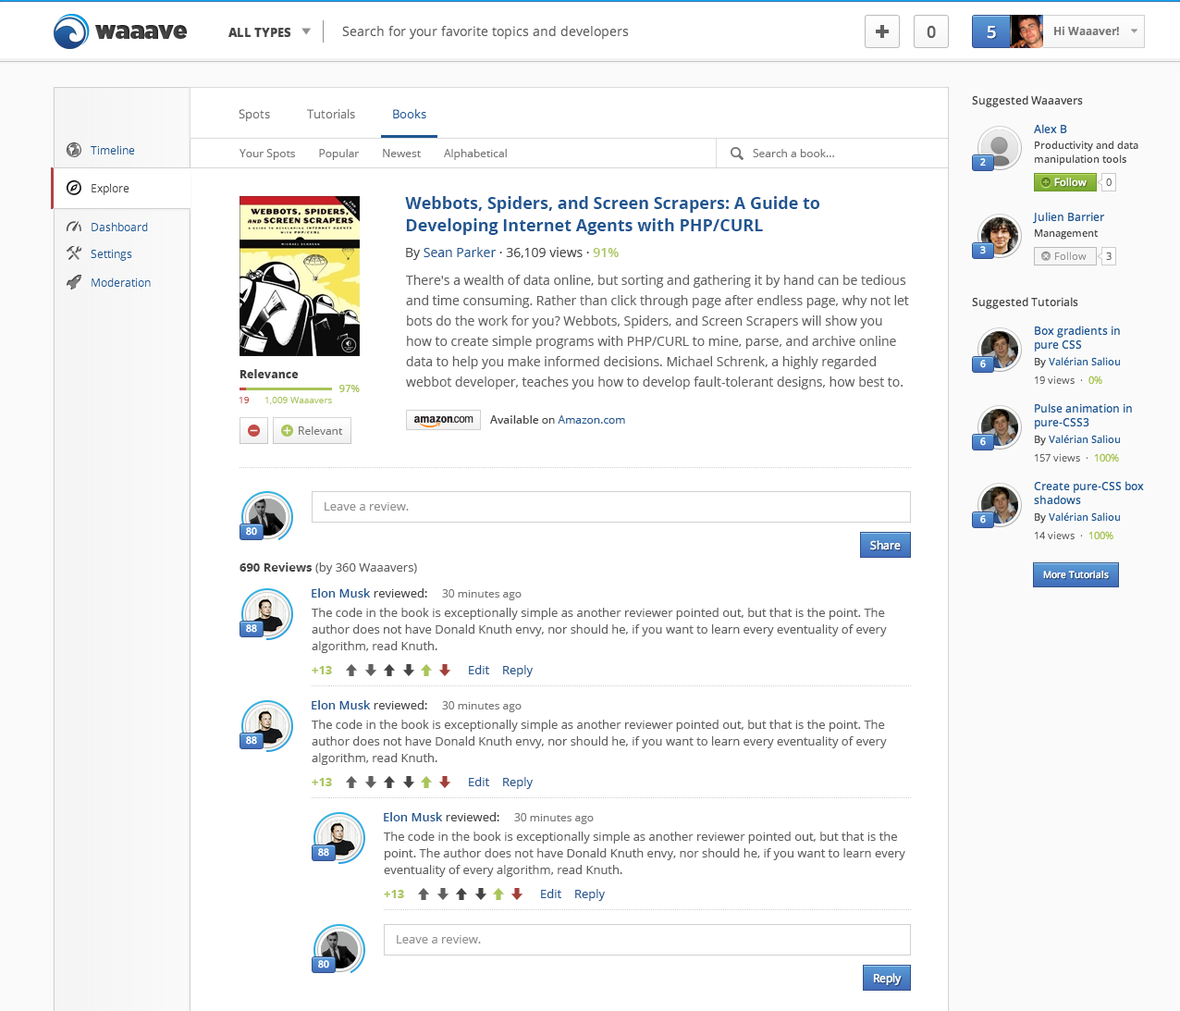
<style>
.page{position:relative;width:1180px;height:1011px;background:#ffffff}
.page>*{position:absolute;margin:0}
.t1{font:11.1px "OpenSans";color:#757575}
.t2{font:16.6px/22.2px "OpenSans-Bold";color:#1f5691}
.t3{font:12.9px "OpenSans";color:#454545}
.t4{font:12.9px "OpenSans";color:#1f5691}
.t5{font:12.9px "OpenSans-Semibold";color:#a9c55a}
.t6{font:12.9px/20.3px "OpenSans";color:#606060}
.t7{font:11.1px "OpenSans-Extrabold";color:#454545}
.t8{font:10.2px "OpenSans-Semibold";color:#aac55a}
.t9{font:9.2px "OpenSans";color:#c34c47}
.t10{font:9.2px "OpenSans";color:#aac55a}
.t11{font:11.1px "OpenSans";color:#1f5691}
.t12{font:11.1px "OpenSans-Semibold";color:#454545}
.t13{font:11.1px "OpenSans";color:#454545}
.t14{font:12px "OpenSans";color:#909090}
.t15{font:12px "OpenSans";color:#606060}
.t16{font:12px "OpenSans-Bold";color:#454545}
.t17{font:12px "OpenSans-Semibold";color:#1f5691}
.t18{font:12px "OpenSans";color:#454545}
.t19{font:12px/16.6px "OpenSans";color:#606060}
.t20{font:12px "OpenSans-Bold";color:#a9c55a}
.t21{font:12px "OpenSans";color:#1f5691}
</style>
<div class="page">
<p class="t1" style="left:239px;top:149px;width:268px;height:11px">Your Spots        Popular        Newest        Alphabetical</p>
<p class="t1" style="left:753px;top:149px;width:81px;height:8px">Search a book...</p>
<p class="t2" style="left:405px;top:196px;width:415px;height:39px">Webbots, Spiders, and Screen Scrapers: A Guide to<br>Developing Internet Agents with PHP/CURL</p>
<p class="t3" style="left:406px;top:247px;width:213px;height:13px">By <span class="t4">Sean Parker </span>· 36,109 views · <span class="t5">91%</span></p>
<p class="t6" style="left:406px;top:275px;width:503px;height:114px">There's a wealth of data online, but sorting and gathering it by hand can be tedious<br>and time consuming. Rather than click through page after endless page, why not let<br>bots do the work for you? Webbots, Spiders, and Screen Scrapers will show you<br>how to create simple programs with PHP/CURL to mine, parse, and archive online<br>data to help you make informed decisions. Michael Schrenk, a highly regarded<br>webbot developer, teaches you how to develop fault-tolerant designs, how best to.</p>
<p class="t7" style="left:239px;top:369px;width:60px;height:9px">Relevance</p>
<p class="t8" style="left:339px;top:385px;width:21px;height:7px">97%</p>
<p class="t9" style="left:239px;top:397px;width:10px;height:6px">19</p>
<p class="t10" style="left:264px;top:397px;width:68px;height:7px">1,009 Waaavers</p>
<p class="t11" style="left:490px;top:415px;width:135px;height:8px"><span class="t12">Available</span><span class="t13"> on </span>Amazon.com</p>
<p class="t1" style="left:299px;top:426px;width:44px;height:9px">Relevant</p>
<p class="t14" style="left:325px;top:502px;width:84px;height:8px">Leave a review.</p>
<p class="t15" style="left:239px;top:562px;width:178px;height:12px"><span class="t16">690 Reviews </span>(by 360 Waaavers)</p>
<p class="t1" style="left:312px;top:588px;width:210px;height:12px"><span class="t17">Elon Musk </span><span class="t18">reviewed:     </span>30 minutes ago</p>
<p class="t19" style="left:312px;top:608px;width:575px;height:45px">The code in the book is exceptionally simple as another reviewer pointed out, but that is the point. The<br>author does not have Donald Knuth envy, nor should he, if you want to learn every eventuality of every<br>algorithm, read Knuth.</p>
<p class="t20" style="left:312px;top:666px;width:20px;height:8px">+13</p>
<p class="t21" style="left:469px;top:665px;width:20px;height:9px">Edit</p>
<p class="t21" style="left:503px;top:665px;width:30px;height:12px">Reply</p>
<p class="t1" style="left:312px;top:700px;width:210px;height:12px"><span class="t17">Elon Musk </span><span class="t18">reviewed:     </span>30 minutes ago</p>
<p class="t19" style="left:312px;top:719px;width:575px;height:46px">The code in the book is exceptionally simple as another reviewer pointed out, but that is the point. The<br>author does not have Donald Knuth envy, nor should he, if you want to learn every eventuality of every<br>algorithm, read Knuth.</p>
<p class="t20" style="left:312px;top:778px;width:20px;height:8px">+13</p>
<p class="t21" style="left:469px;top:777px;width:20px;height:9px">Edit</p>
<p class="t21" style="left:503px;top:777px;width:30px;height:12px">Reply</p>
<p class="t1" style="left:384px;top:812px;width:210px;height:12px"><span class="t17">Elon Musk </span><span class="t18">reviewed:     </span>30 minutes ago</p>
<p class="t19" style="left:384px;top:831px;width:521px;height:46px">The code in the book is exceptionally simple as another reviewer pointed out, but that is the<br>point. The author does not have Donald Knuth envy, nor should he, if you want to learn every<br>eventuality of every algorithm, read Knuth.</p>
<p class="t20" style="left:384px;top:890px;width:20px;height:8px">+13</p>
<p class="t21" style="left:541px;top:889px;width:20px;height:9px">Edit</p>
<p class="t21" style="left:575px;top:889px;width:30px;height:12px">Reply</p>
<p class="t14" style="left:397px;top:935px;width:84px;height:8px">Leave a review.</p>
</div>
